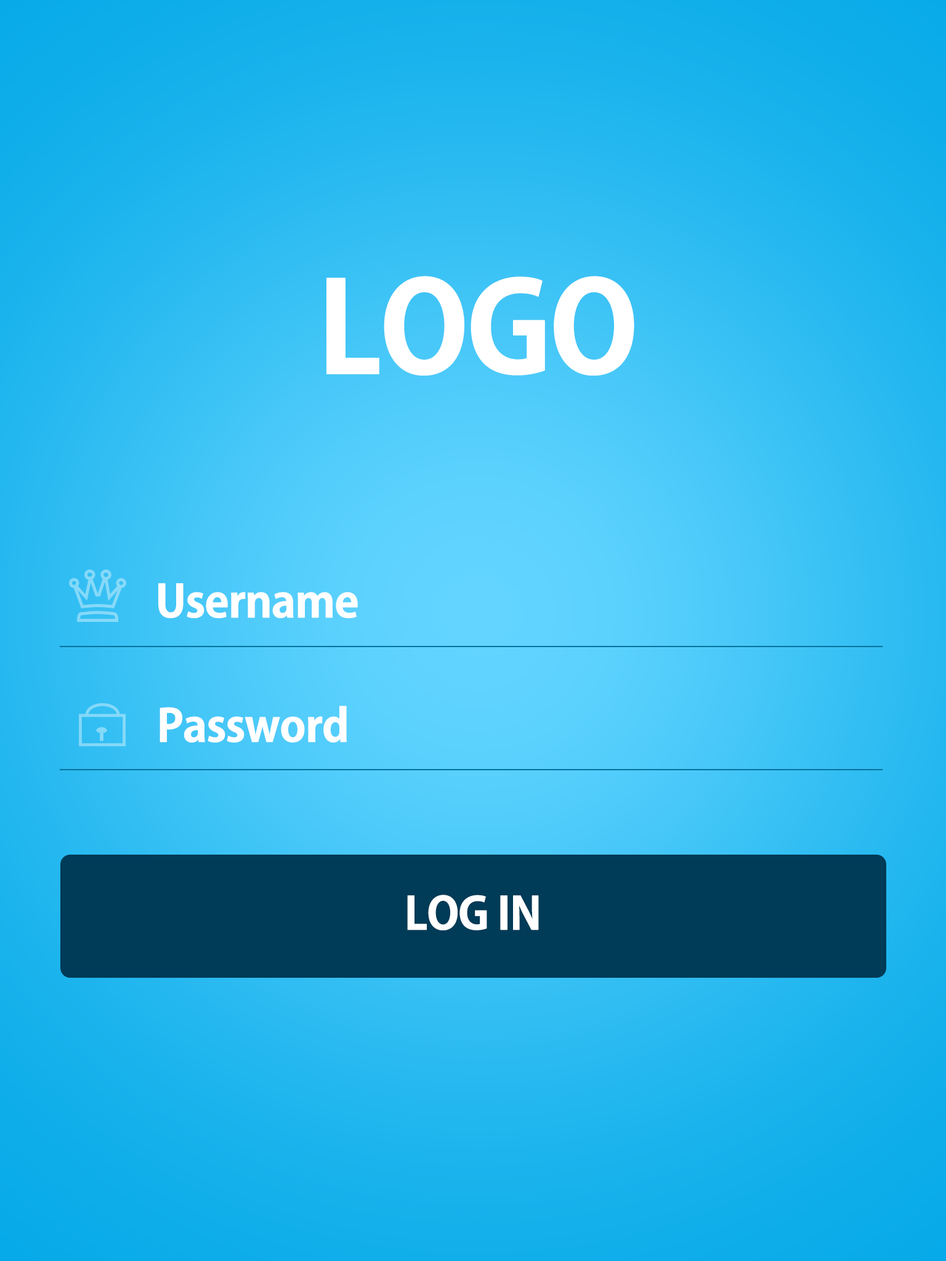
<style>
.page{position:relative;width:946px;height:1261px}
.page>*{position:absolute;margin:0}
.t1{font:124.3px "AdobeGothicStd-Bold";letter-spacing:-0.04em;color:#ffffff;font-weight:bold}
.t2{font:44.3px "AdobeGothicStd-Bold";letter-spacing:-0.04em;color:#ffffff;font-weight:bold}
</style>
<div class="page">
<p class="t1" style="left:326px;top:276px;width:308px;height:100px">LOGO</p>
<p class="t2" style="left:158px;top:583px;width:200px;height:35px">Username</p>
<p class="t2" style="left:159px;top:706px;width:188px;height:37px">Password</p>
<p class="t2" style="left:407px;top:895px;width:132px;height:35px">LOG IN</p>
</div>
